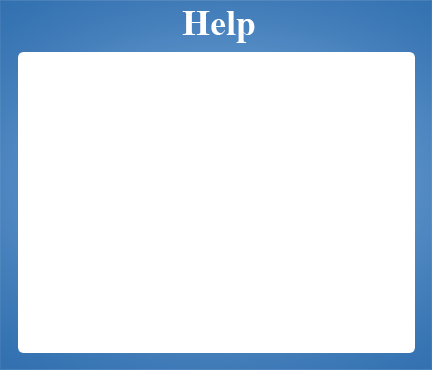
<style>
.page{position:relative;width:432px;height:370px;background:#ffffff}
.page>*{position:absolute;margin:0}
.t1{font:36px "TimesNewRomanPS-BoldMT";color:#ffffff}
</style>
<div class="page">
<p class="t1" style="left:182px;top:11px;width:73px;height:32px">Help</p>
</div>
